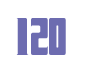
<style>
.page{position:relative;width:94px;height:71px;background:#ffffff}
.page>*{position:absolute;margin:0}
.t1{font:50px "Far-Out!";color:#6d6cb0}
</style>
<div class="page">
<p class="t1" style="left:16px;top:18px;width:50px;height:37px">120</p>
</div>
